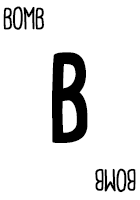
<style>
.page{position:relative;width:140px;height:200px;background:#ffffff}
.page>*{position:absolute;margin:0}
.t1{font:28.7px "CardenioModern-Reg";letter-spacing:-0.05em;color:#000000;text-transform:uppercase;font-weight:bold;scale:0.87 1}
.t2{font:115px "CardenioModern-Bold";letter-spacing:-0.1em;color:#000000;text-transform:uppercase;font-weight:bold;scale:0.87 1}
</style>
<div class="page">
<p class="t1" style="left:3px;top:6px;width:42px;height:24px">bomb</p>
<p class="t2" style="left:52px;top:52px;width:36px;height:91px">B</p>
<p class="t1" style="left:95px;top:168px;width:41px;height:25px;rotate:180deg">bomb</p>
</div>
